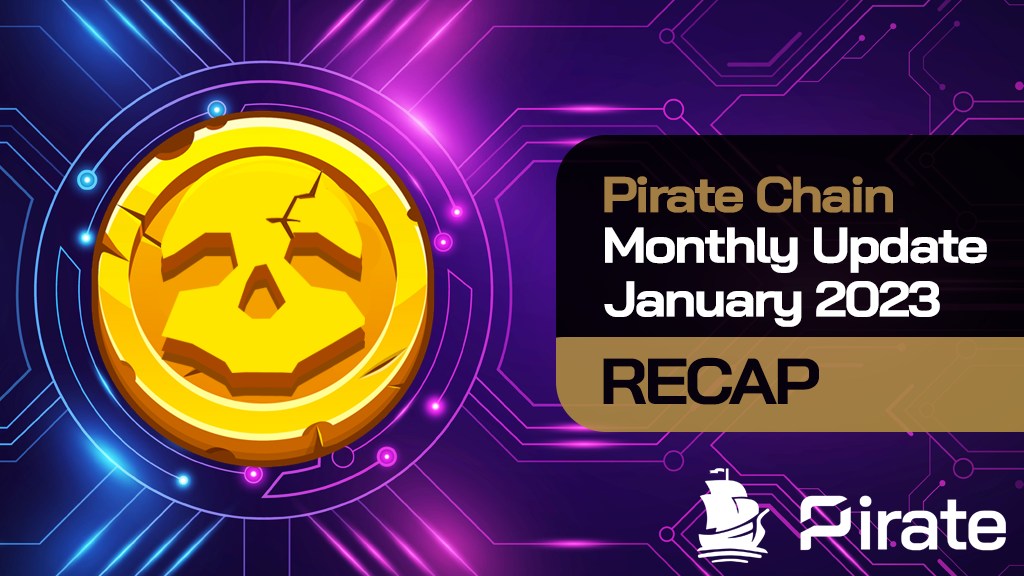
<style>
.page{position:relative;width:1024px;height:576px}
.page>*{position:absolute;margin:0}
.t1{font:50px "BaiJamjuree-Bold";letter-spacing:-0.05em;color:#a27d44;scale:1.1 1}
.t2{font:50px "BaiJamjuree-Bold";letter-spacing:-0.05em;color:#ffffff;scale:1.1 1}
.t3{font:64.8px "BaiJamjuree-Bold";letter-spacing:-0.05em;color:#06010c;text-transform:uppercase;scale:1.1 1}
</style>
<div class="page">
<p class="t1" style="left:604px;top:176px;width:289px;height:37px">Pirate Chain</p>
<p class="t2" style="left:605px;top:227px;width:382px;height:46px">Monthly Update</p>
<p class="t2" style="left:604px;top:281px;width:336px;height:46px">January 2023</p>
<p class="t3" style="left:603px;top:357px;width:216px;height:48px">recap</p>
</div>
